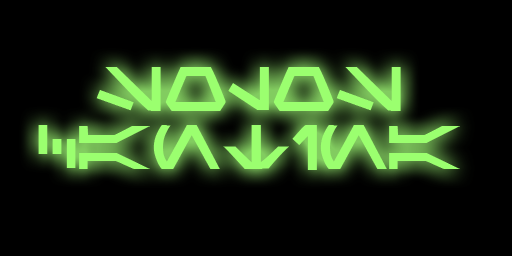
<style>
.page{position:relative;width:512px;height:256px;background:#000000}
.page>*{position:absolute;margin:0}
.t1{font:48px "Aurabesh";color:#9bff6f}
</style>
<div class="page">
<p class="t1" style="left:38px;top:67px;width:422px;height:103px;text-align:center">SOLOS<br>CANTINA</p>
</div>
